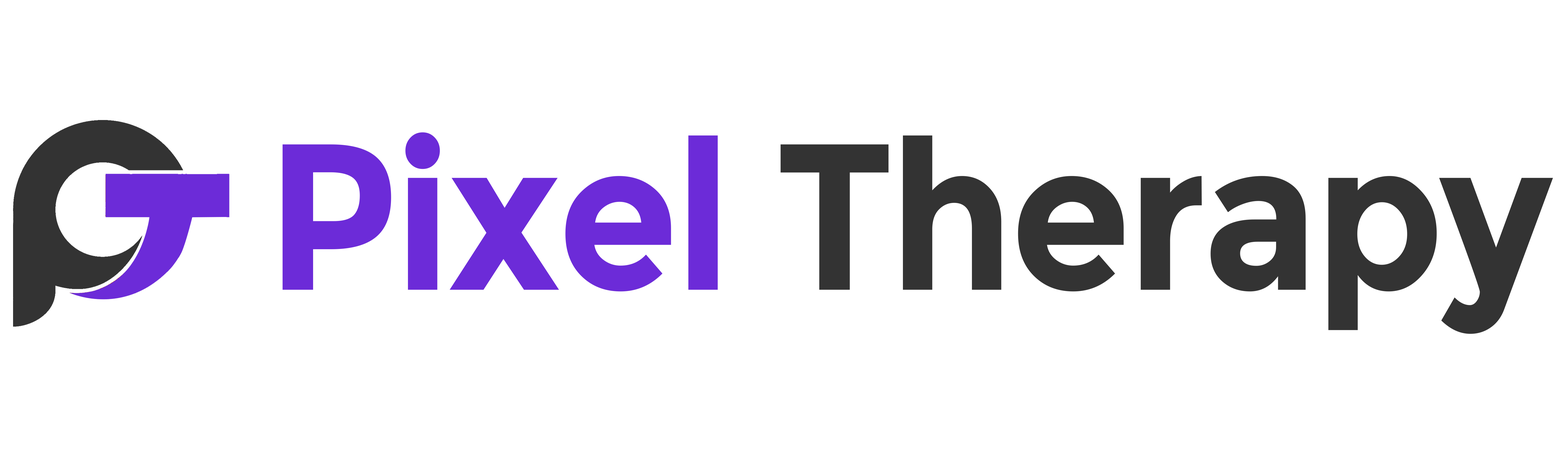
<style>
.page{position:relative;width:1568px;height:455px;background:#ffffff}
.page>*{position:absolute;margin:0}
.t1{font:207.7px "Montserrat-Bold";letter-spacing:-0.02em;color:#333333;scale:0.94 1}
.t2{font:207.7px "Montserrat-Bold";letter-spacing:-0.02em;color:#6c2bd8;scale:0.94 1}
</style>
<div class="page">
<p class="t1" style="left:283px;top:132px;width:1270px;height:202px"><span class="t2">Pixel </span>Therapy</p>
</div>
